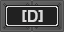
<style>
.page{position:relative;width:64px;height:32px;background:#212121}
.page>*{position:absolute;margin:0}
.t1{font:12px "Helvetica-Bold";color:#dadada}
</style>
<div class="page">
<p class="t1" style="left:22px;top:10px;width:21px;height:12px">[D]</p>
</div>
